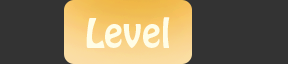
<style>
.page{position:relative;width:288px;height:64px;background:#333333}
.page>*{position:absolute;margin:0}
.t1{font:36px "HoboStd";color:#fffde6}
</style>
<div class="page">
<p class="t1" style="left:86px;top:17px;width:84px;height:31px">Level</p>
</div>
